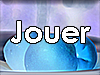
<style>
.page{position:relative;width:100px;height:75px}
.page>*{position:absolute;margin:0}
.t1{font:30px "CenturyGothic-Bold";color:#ffffff}
</style>
<div class="page">
<p class="t1" style="left:11px;top:21px;width:79px;height:22px">Jouer</p>
</div>
